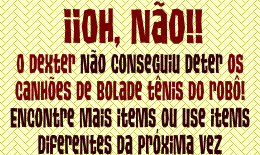
<style>
.page{position:relative;width:260px;height:155px;background:#ffffcc}
.page>*{position:absolute;margin:0}
.t1{font:48.4px "TikiIsland";color:#770000;scale:0.84 1}
.t2{font:27.1px/26.9px "TikiIsland";color:#330000;scale:0.7 1}
.t3{font:27.1px/26.9px "TikiIsland";color:#770000;scale:0.7 1}
</style>
<div class="page">
<p class="t1" style="left:64px;top:1px;width:139px;height:48px">¡¡Oh, não!!</p>
<p class="t2" style="left:10px;top:49px;width:240px;height:106px;text-align:center"><span class="t3">O Dexter</span> não conseguiu deter <span class="t3">os<br>canhões de bolade tênis do robô!</span><br>Encontre mais items ou use items<br>diferentes da próxima vez</p>
</div>
